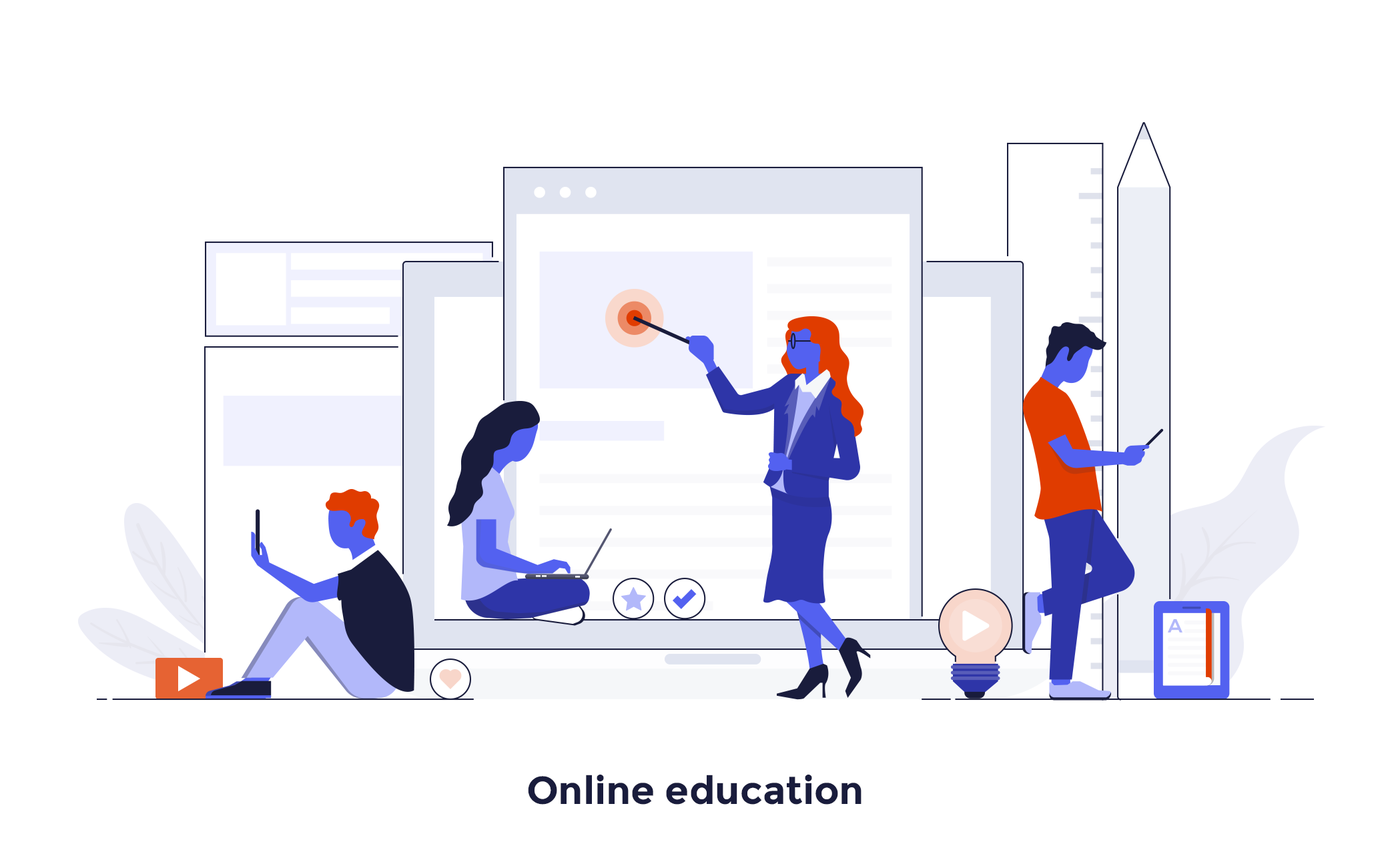
<style>
.page{position:relative;width:1390px;height:858px;background:#ffffff}
.page>*{position:absolute;margin:0}
.t1{font:38.9px "Montserrat-Bold";color:#191c3c}
</style>
<div class="page">
<p class="t1" style="left:528px;top:775px;width:333px;height:30px">Online education</p>
</div>
